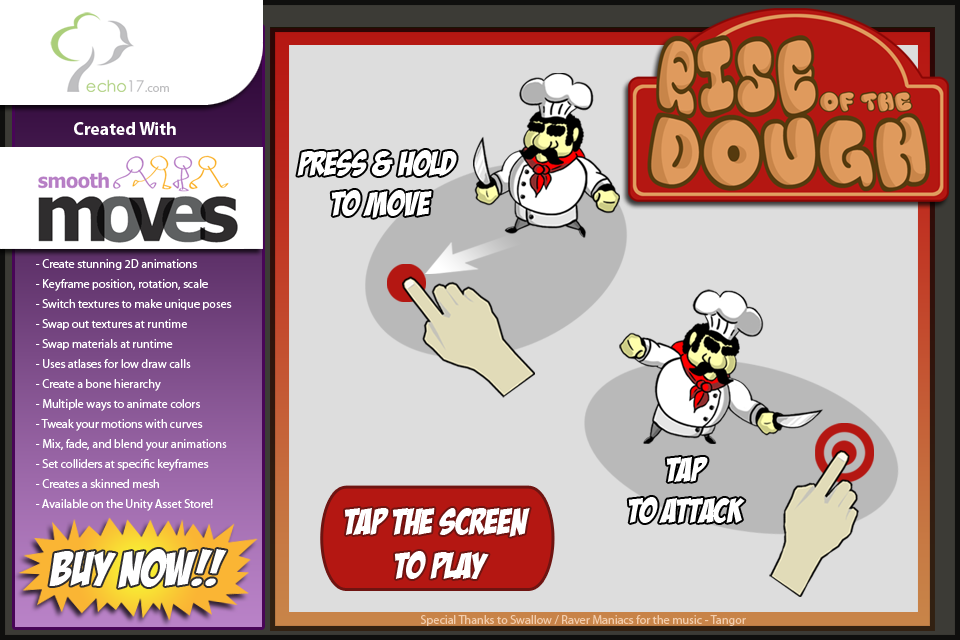
<style>
.page{position:relative;width:960px;height:640px;background:#dddddd}
.page>*{position:absolute;margin:0}
.t1{font:18px "MyriadPro-Bold";color:#ffffff}
.t2{font:34.1px "BadaBoomBB";color:#ffffff}
.t3{font:12px/20px "MyriadPro-Regular";color:#ffffff}
.t4{font:36.3px "BadaBoomBB";color:#ffffff}
.t5{font:48px "BadaBoomBB";color:#ffffff}
.t6{font:12.2px "MyriadPro-Regular";color:#f2cdad}
</style>
<div class="page">
<p class="t1" style="left:74px;top:122px;width:102px;height:13px">Created With</p>
<p class="t2" style="left:297px;top:150px;width:160px;height:68px;text-align:center">Press &amp; Hold <br>To Move</p>
<p class="t3" style="left:36px;top:259px;width:196px;height:252px">- Create stunning 2D animations<br>- Keyframe position, rotation, scale<br>- Switch textures to make unique poses<br>- Swap out textures at runtime<br>- Swap materials at runtime<br>- Uses atlases for low draw calls<br>- Create a bone hierarchy<br>- Multiple ways to animate colors<br>- Tweak your motions with curves<br>- Mix, fade, and blend your animations<br>- Set colliders at specific keyframes<br>- Creates a skinned mesh<br>- Available on the Unity Asset Store!</p>
<p class="t2" style="left:628px;top:457px;width:117px;height:66px;text-align:center">Tap<br>To Attack</p>
<p class="t4" style="left:344px;top:508px;width:186px;height:71px;text-align:center">Tap the screen <br>to play</p>
<p class="t5" style="left:49px;top:549px;width:178px;height:39px">Buy Now!!</p>
<p class="t6" style="left:421px;top:615px;width:325px;height:11px">Special Thanks to Swallow / Raver Maniacs for the music - Tangor</p>
</div>
